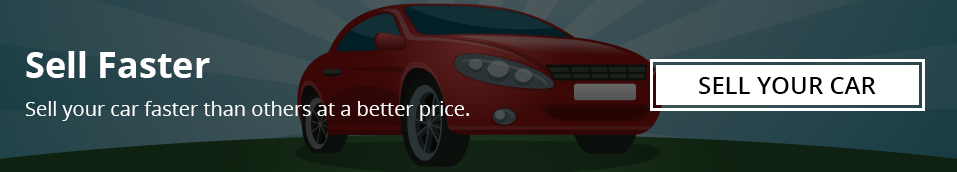
<style>
.page{position:relative;width:957px;height:172px}
.page>*{position:absolute;margin:0}
.t1{font:36px "OpenSans-Bold";color:#ffffff}
.t2{font:24px "OpenSans-Semibold";color:#000000;text-transform:uppercase}
.t3{font:20px "OpenSans";color:#ffffff}
</style>
<div class="page">
<p class="t1" style="left:26px;top:51px;width:184px;height:27px">Sell Faster</p>
<p class="t2" style="left:699px;top:77px;width:177px;height:17px">Sell Your Car</p>
<p class="t3" style="left:25px;top:101px;width:444px;height:20px">Sell your car faster than others at a better price.</p>
</div>
